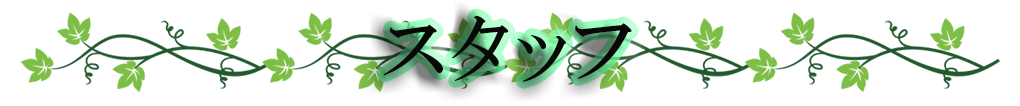
<style>
.page{position:relative;width:1020px;height:106px;background:#ffffff}
.page>*{position:absolute;margin:0}
.t1{font:74.2px "HGPMinchoB";letter-spacing:0.05em;color:#080807}
</style>
<div class="page">
<p class="t1" style="left:383px;top:15px;width:249px;height:67px">スタッフ</p>
</div>
